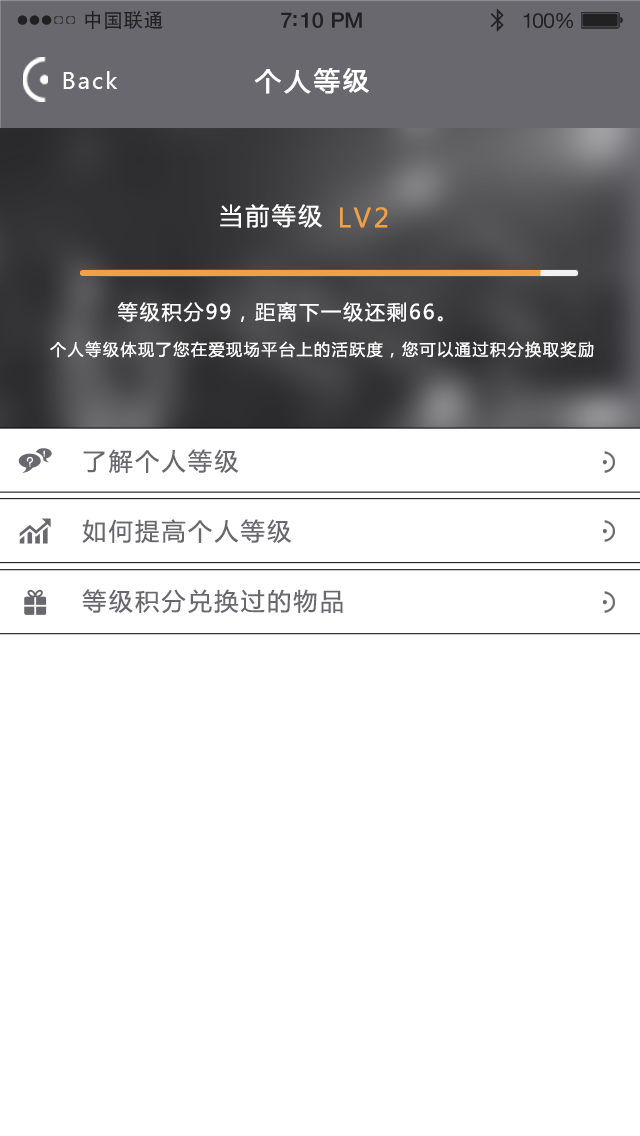
<style>
.page{position:relative;width:640px;height:1136px;background:#ffffff}
.page>*{position:absolute;margin:0}
.t1{font:19.7px "AdobeHeitiStd-Regular";letter-spacing:0.02em;color:#212121}
.t2{font:21.4px "HelveticaNeue-Medium";letter-spacing:-0.02em;color:#212121}
.t3{font:20.6px "HelveticaNeue";letter-spacing:-0.02em;color:#212121}
.t4{font:22px "MicrosoftYaHei";letter-spacing:0.1em;color:#ffffff}
.t5{font:26px "MicrosoftYaHei";letter-spacing:0.1em;color:#ffffff;font-weight:bold}
.t6{font:24px "MicrosoftYaHei";letter-spacing:0.1em;color:#ffffff}
.t7{font:26px "MicrosoftYaHei";letter-spacing:0.1em;color:#f0a046}
.t8{font:20px "MicrosoftYaHei";letter-spacing:0.1em;color:#ffffff}
.t9{font:16px "MicrosoftYaHei";letter-spacing:0.1em;color:#ffffff}
.t10{font:24px "MicrosoftYaHei";letter-spacing:0.1em;color:#68686e}
</style>
<div class="page">
<p class="t1" style="left:85px;top:10px;width:78px;height:20px">中国联通</p>
<p class="t2" style="left:281px;top:12px;width:81px;height:16px">7:10 PM</p>
<p class="t3" style="left:523px;top:13px;width:50px;height:16px">100%</p>
<p class="t4" style="left:63px;top:71px;width:55px;height:18px">Back</p>
<p class="t5" style="left:254px;top:68px;width:115px;height:26px">个人等级</p>
<p class="t6" style="left:220px;top:204px;width:102px;height:24px">当前等级</p>
<p class="t7" style="left:340px;top:207px;width:48px;height:21px">LV2</p>
<p class="t8" style="left:117px;top:302px;width:326px;height:20px">等级积分99，距离下一级还剩66。</p>
<p class="t9" style="left:50px;top:341px;width:544px;height:17px">个人等级体现了您在爱现场平台上的活跃度，您可以通过积分换取奖励</p>
<p class="t10" style="left:83px;top:449px;width:156px;height:24px">了解个人等级</p>
<p class="t10" style="left:82px;top:519px;width:209px;height:24px">如何提高个人等级</p>
<p class="t10" style="left:82px;top:589px;width:261px;height:25px">等级积分兑换过的物品</p>
</div>
